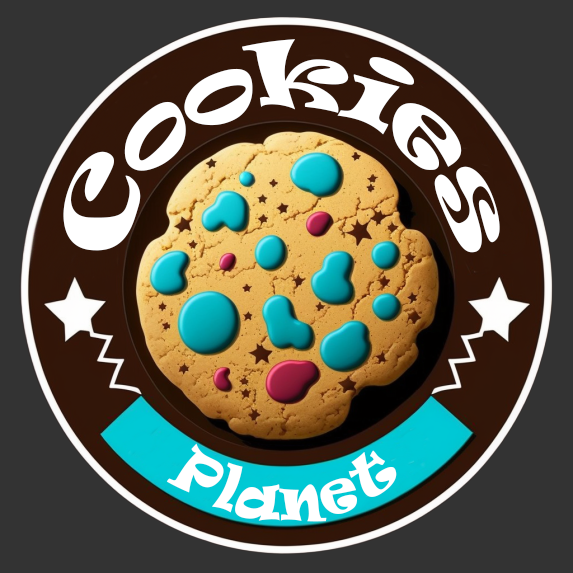
<style>
.page{position:relative;width:573px;height:573px;background:#333333}
.page>*{position:absolute;margin:0}
.t1{font:84px "Ravie";letter-spacing:-0.01em;color:#ffffff;scale:0.71 1}
.t2{font:56px "Ravie";letter-spacing:-0.01em;color:#ffffff;scale:0.71 1}
</style>
<div class="page">
<p class="t1" style="left:63px;top:39px;width:437px;height:214px;text-align:center">Cookies</p>
<p class="t2" style="left:166px;top:443px;width:231px;height:79px">Planet</p>
</div>
